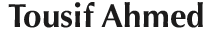
<style>
.page{position:relative;width:214px;height:32px;background:#ffffff}
.page>*{position:absolute;margin:0}
.t1{font:33.3px "Optima-Bold";color:#1c1b1b}
</style>
<div class="page">
<p class="t1" style="left:8px;top:2px;width:195px;height:26px">Tousif Ahmed</p>
</div>
